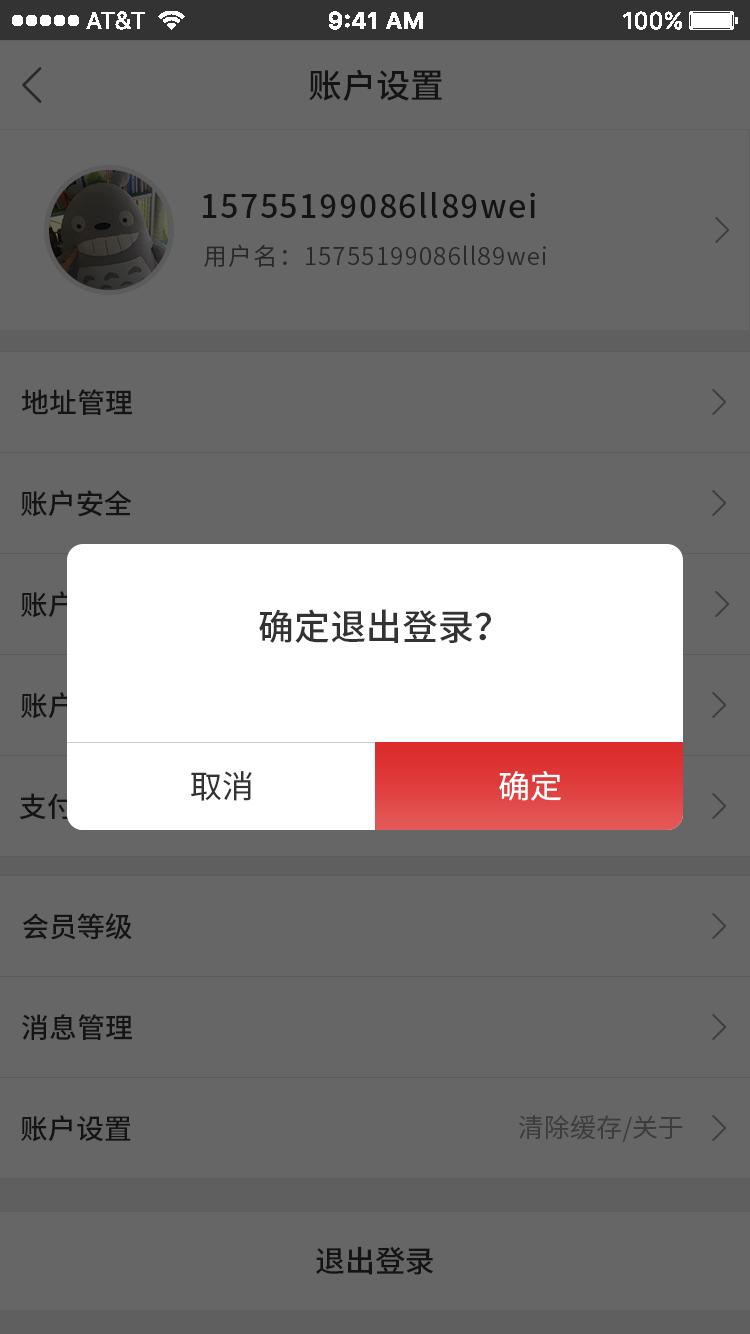
<style>
.page{position:relative;width:750px;height:1334px;background:#666666}
.page>*{position:absolute;margin:0}
.t1{font:34px "SourceHanSansCN-Medium";color:#141414}
.t2{font:32px "SourceHanSansCN-Medium";letter-spacing:0.05em;color:#141414}
.t3{font:24px "SourceHanSansCN-Normal";letter-spacing:0.05em;color:#292929}
.t4{font:28px "SourceHanSansCN-Medium";color:#141414}
.t5{font:36px "SourceHanSansCN-Medium";color:#333333}
.t6{font:32px "SourceHanSansCN-Regular";color:#333333}
.t7{font:32px "SourceHanSansCN-Regular";color:#ffffff}
.t8{font:26px "SourceHanSansCN-Regular";color:#3d3d3d}
.t9{font:30px "SourceHanSansCN-Medium";color:#141414}
</style>
<div class="page">
<p class="t1" style="left:309px;top:69px;width:133px;height:33px">账户设置</p>
<p class="t2" style="left:203px;top:192px;width:332px;height:26px">15755199086ll89wei</p>
<p class="t3" style="left:204px;top:244px;width:342px;height:23px">用户名：15755199086ll89wei</p>
<p class="t4" style="left:21px;top:389px;width:111px;height:26px">地址管理</p>
<p class="t4" style="left:21px;top:490px;width:111px;height:27px">账户安全</p>
<p class="t5" style="left:259px;top:609px;width:232px;height:34px">确定退出登录？</p>
<p class="t6" style="left:191px;top:771px;width:61px;height:30px">取消</p>
<p class="t7" style="left:499px;top:771px;width:62px;height:30px">确定</p>
<p class="t4" style="left:22px;top:913px;width:110px;height:27px">会员等级</p>
<p class="t4" style="left:22px;top:1014px;width:110px;height:26px">消息管理</p>
<p class="t4" style="left:21px;top:1115px;width:110px;height:27px">账户设置</p>
<p class="t8" style="left:518px;top:1115px;width:165px;height:27px">清除缓存/关于</p>
<p class="t9" style="left:316px;top:1246px;width:118px;height:29px">退出登录</p>
</div>
